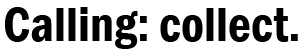
<style>
.page{position:relative;width:300px;height:50px;background:#ffffff}
.page>*{position:absolute;margin:0}
.t1{font:50px "FranklinGothic-DemiCond";color:#000000}
</style>
<div class="page">
<p class="t1" style="left:4px;top:7px;width:294px;height:42px">Calling: collect.</p>
</div>
